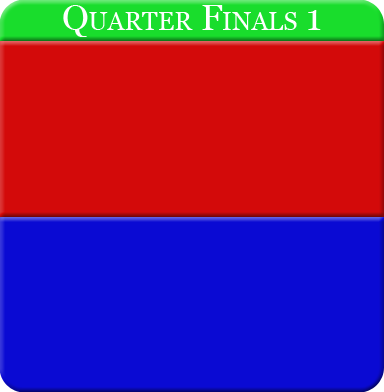
<style>
.page{position:relative;width:384px;height:392px;background:#d30a0a}
.page>*{position:absolute;margin:0}
.t1{font:36px "Georgia";color:#ffffff;font-variant:small-caps}
</style>
<div class="page">
<p class="t1" style="left:63px;top:5px;width:258px;height:32px">Quarter Finals 1</p>
</div>
